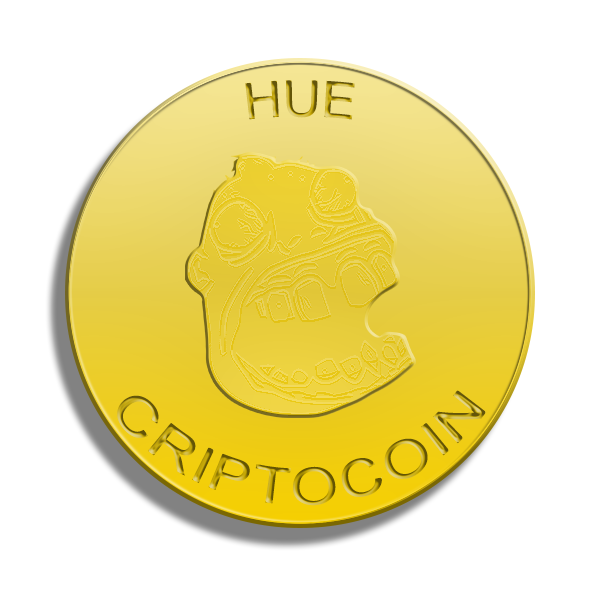
<style>
.page{position:relative;width:600px;height:600px;background:#ffffff}
.page>*{position:absolute;margin:0}
.t1{font:50px "ArialMT"}
</style>
<div class="page">
<p class="t1" style="left:245px;top:80px;width:110px;height:40px">HUE</p>
<p class="t1" style="left:117px;top:390px;width:370px;height:116px">CRIPTOCOIN</p>
</div>
